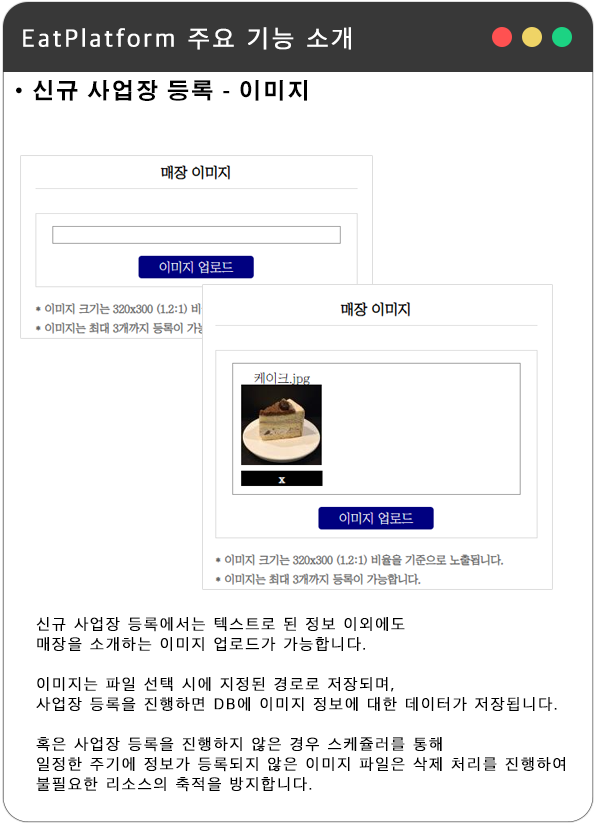
<style>
.page{position:relative;width:595px;height:825px;background:#ffffff}
.page>*{position:absolute;margin:0}
.t1{font:25px "AppleSDGothicNeoL00";letter-spacing:0.1em;color:#ffffff;font-weight:bold}
.t2{font:25px "AppleSDGothicNeoL00";letter-spacing:0.1em;color:#ffffff;font-variant:small-caps;font-weight:bold}
.t3{font:22px "AdobeGothicStd-Bold";letter-spacing:0.1em;color:#000000}
.t4{font:16px/20px "AppleSDGothicNeoL00";letter-spacing:0.1em;color:#000000;font-weight:bold}
</style>
<div class="page">
<p class="t1" style="left:23px;top:27px;width:328px;height:23px"><span class="t2">E</span>atPlatform 주요 기능 소개</p>
<p class="t3" style="left:16px;top:80px;width:292px;height:21px">·신규 사업장 등록 - 이미지</p>
<p class="t4" style="left:36px;top:617px;width:529px;height:175px">신규 사업장 등록에서는 텍스트로 된 정보 이외에도 <br>매장을 소개하는 이미지 업로드가 가능합니다.<br><br>이미지는 파일 선택 시에 지정된 경로로 저장되며,<br>사업장 등록을 진행하면 DB에 이미지 정보에 대한 데이터가 저장됩니다.<br><br>혹은 사업장 등록을 진행하지 않은 경우 스케쥴러를 통해<br>일정한 주기에 정보가 등록되지 않은 이미지 파일은 삭제 처리를 진행하여<br>불필요한 리소스의 축적을 방지합니다.</p>
</div>
